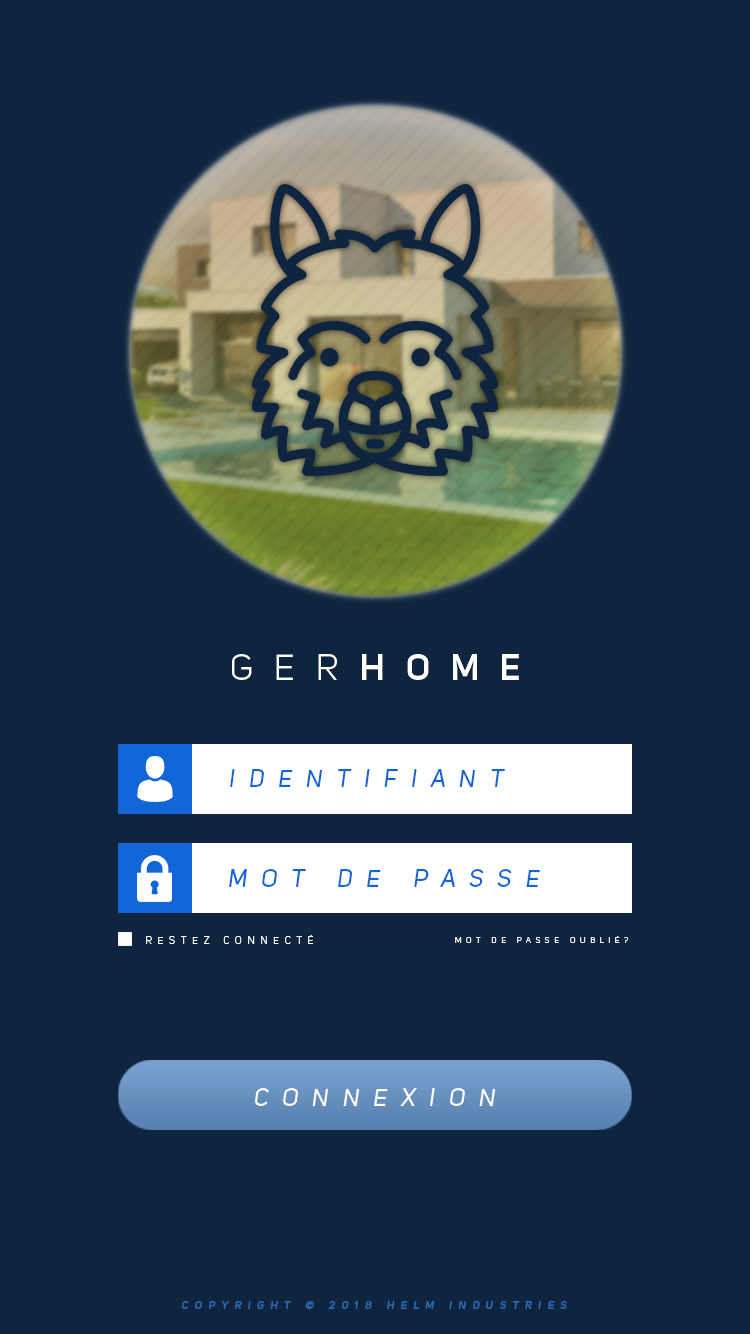
<style>
.page{position:relative;width:750px;height:1334px;background:#0f253f}
.page>*{position:absolute;margin:0}
.t1{font:36px "UniSansBook";letter-spacing:0.585em;color:#ffffff;text-transform:uppercase}
.t2{font:36px "UniSansSemiBold";letter-spacing:0.585em;color:#ffffff;text-transform:uppercase}
.t3{font:24px "UniSansRegularItalic";letter-spacing:0.585em;color:#1265d6;text-transform:uppercase}
.t4{font:10px "UniSansBook";letter-spacing:0.585em;color:#ffffff;text-transform:uppercase}
.t5{font:8px "UniSansBook";letter-spacing:0.585em;color:#ffffff;text-transform:uppercase}
.t6{font:24px "UniSansRegularItalic";letter-spacing:0.585em;color:#ffffff;text-transform:uppercase}
.t7{font:11px "UniSansSemiBoldItalic";letter-spacing:0.585em;color:#2a69b4;text-transform:uppercase}
</style>
<div class="page">
<p class="t1" style="left:232px;top:654px;width:105px;height:26px">Ger</p>
<p class="t2" style="left:362px;top:654px;width:157px;height:26px">HOME</p>
<p class="t3" style="left:230px;top:769px;width:275px;height:19px">identifiant</p>
<p class="t3" style="left:229px;top:869px;width:311px;height:18px">Mot de passe</p>
<p class="t4" style="left:146px;top:935px;width:167px;height:9px">restez connecté</p>
<p class="t5" style="left:455px;top:936px;width:174px;height:7px">Mot de passe oublié?</p>
<p class="t6" style="left:255px;top:1088px;width:240px;height:19px">connexion</p>
<p class="t7" style="left:182px;top:1301px;width:385px;height:8px">Copyright © 2018 helm industries</p>
</div>
